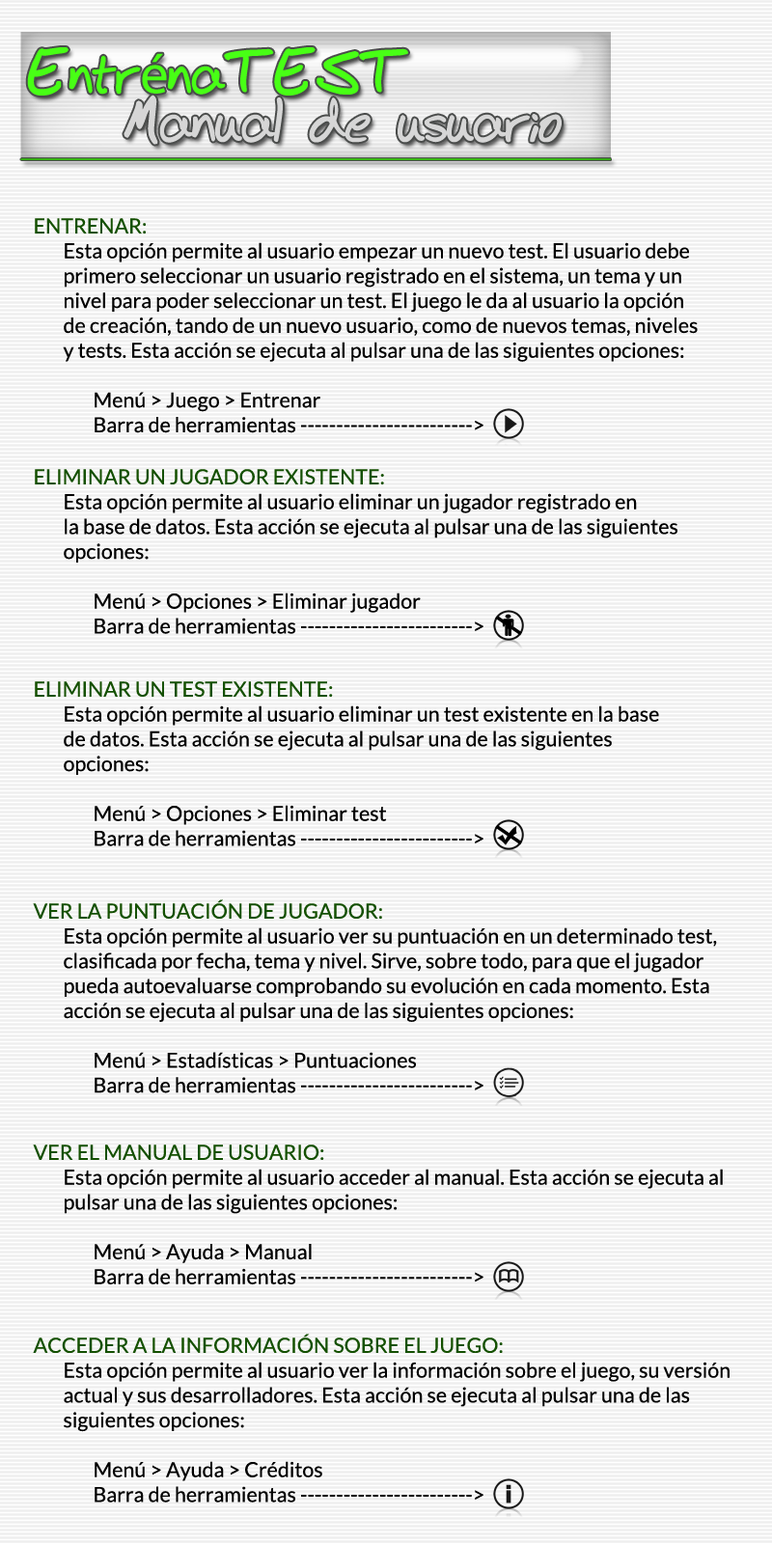
<style>
.page{position:relative;width:772px;height:1544px}
.page>*{position:absolute;margin:0}
.t1{font:56.1px "BudHand-Bold";color:#48ff15}
.t2{font:56.1px "MyriadPro-Regular";color:#48ff15}
.t3{font:20.7px "Lato-Regular";color:#000000}
.t4{font:20.7px "Lato-Regular";color:#145000}
</style>
<div class="page">
<p class="t1" style="left:27px;top:47px;width:381px;height:49px">Entr<span class="t2">é</span>naTEST</p>
<p class="t3" style="left:35px;top:218px;width:663px;height:215px"><span class="t4">ENTRENAR:</span> <br> Esta opción permite al usuario empezar un nuevo test. El usuario debe<br> primero seleccionar un usuario registrado en el sistema, un tema y un <br> nivel para poder seleccionar un test. El juego le da al usuario la opción<br> de creación, tando de un nuevo usuario, como de nuevos temas, niveles<br> y tests. Esta acción se ejecuta al pulsar una de las siguientes opciones:<br><br>  Menú &gt; Juego &gt; Entrenar<br>  Barra de herramientas ------------------------&gt;</p>
<p class="t3" style="left:35px;top:469px;width:643px;height:165px"><span class="t4">ELIMINAR UN JUGADOR EXISTENTE:</span> <br> Esta opción permite al usuario eliminar un jugador registrado en<br> la base de datos. Esta acción se ejecuta al pulsar una de las siguientes <br> opciones:<br><br>  Menú &gt; Opciones &gt; Eliminar jugador<br>  Barra de herramientas ------------------------&gt;</p>
<p class="t3" style="left:35px;top:681px;width:624px;height:165px"><span class="t4">ELIMINAR UN TEST EXISTENTE:</span> <br> Esta opción permite al usuario eliminar un test existente en la base <br> de datos. Esta acción se ejecuta al pulsar una de las siguientes <br> opciones:<br><br>  Menú &gt; Opciones &gt; Eliminar test<br>  Barra de herramientas ------------------------&gt;</p>
<p class="t3" style="left:33px;top:900px;width:684px;height:194px"><span class="t4">VER LA PUNTUACIÓN DE JUGADOR:</span> <br> Esta opción permite al usuario ver su puntuación en un determinado test, <br> clasificada por fecha, tema y nivel. Sirve, sobre todo, para que el jugador<br> pueda autoevaluarse comprobando su evolución en cada momento. Esta <br> acción se ejecuta al pulsar una de las siguientes opciones:<br><br>  Menú &gt; Estadísticas &gt; Puntuaciones<br>  Barra de herramientas ------------------------&gt;</p>
<p class="t3" style="left:33px;top:1145px;width:690px;height:140px"><span class="t4">VER EL MANUAL DE USUARIO:</span> <br> Esta opción permite al usuario acceder al manual. Esta acción se ejecuta al<br> pulsar una de las siguientes opciones:<br><br>  Menú &gt; Ayuda &gt; Manual<br>  Barra de herramientas ------------------------&gt;</p>
<p class="t3" style="left:33px;top:1334px;width:697px;height:169px"><span class="t4">ACCEDER A LA INFORMACIÓN SOBRE EL JUEGO:</span> <br> Esta opción permite al usuario ver la información sobre el juego, su versión<br> actual y sus desarrolladores. Esta acción se ejecuta al pulsar una de las <br> siguientes opciones:<br><br>  Menú &gt; Ayuda &gt; Créditos<br>  Barra de herramientas ------------------------&gt;</p>
</div>
